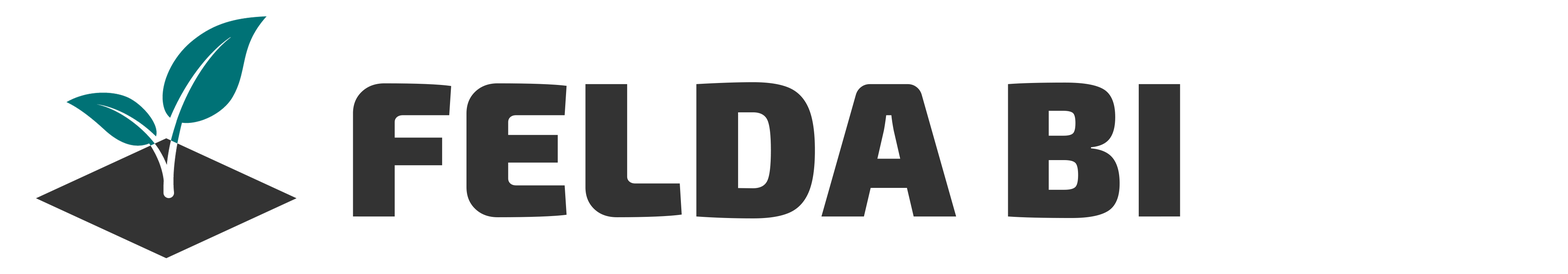
<style>
.page{position:relative;width:1568px;height:274px;background:#ffffff}
.page>*{position:absolute;margin:0}
.t1{font:191.9px "Exo2-Black";letter-spacing:0.02em;color:#333333}
</style>
<div class="page">
<p class="t1" style="left:353px;top:82px;width:827px;height:137px">FELDA BI</p>
</div>
